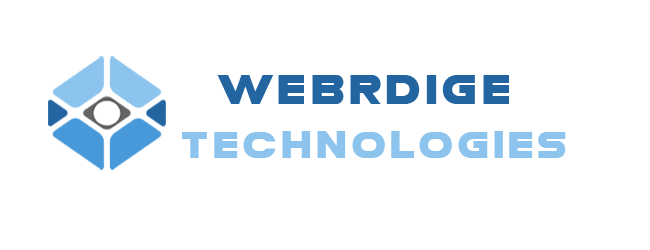
<style>
.page{position:relative;width:650px;height:250px;background:#ffffff}
.page>*{position:absolute;margin:0}
.t1{font:42.1px "MesaGrande";letter-spacing:0.045em;color:#2365a1;scale:0.94 1}
.t2{font:37.9px "MesaGrande";letter-spacing:0.045em;color:#8dc4ed;scale:0.94 1}
</style>
<div class="page">
<p class="t1" style="left:217px;top:75px;width:292px;height:29px">webrdige</p>
<p class="t2" style="left:182px;top:131px;width:384px;height:27px">technologies</p>
</div>
